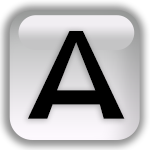
<style>
.page{position:relative;width:150px;height:150px}
.page>*{position:absolute;margin:0}
.t1{font:120px "OpenDyslexic-Regular";letter-spacing:0.005em;color:#000000;scale:1.2 1}
</style>
<div class="page">
<p class="t1" style="left:28px;top:31px;width:97px;height:88px">A</p>
</div>
